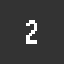
<style>
.page{position:relative;width:64px;height:64px;background:#333333}
.page>*{position:absolute;margin:0}
.t1{font:40.9px "Glasstown-NBP";letter-spacing:0.005em;color:#ffffff;font-weight:bold}
</style>
<div class="page">
<p class="t1" style="left:26px;top:20px;width:11px;height:24px">2</p>
</div>
